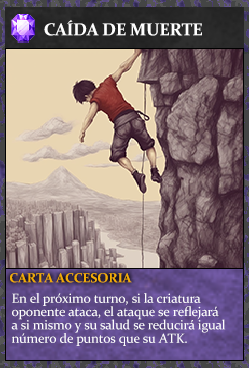
<style>
.page{position:relative;width:249px;height:368px}
.page>*{position:absolute;margin:0}
.t1{font:17.3px "Constantia-Bold";letter-spacing:-0.02em;color:#ffffff}
.t2{font:13.3px "Constantia-Bold";letter-spacing:-0.02em;color:#f2ac05}
.t3{font:13.3px/13.3px "Constantia";letter-spacing:-0.02em;color:#ffffff}
</style>
<div class="page">
<p class="t1" style="left:44px;top:20px;width:158px;height:16px">CAÍDA DE MUERTE</p>
<p class="t2" style="left:10px;top:273px;width:122px;height:10px">CARTA ACCESORIA</p>
<p class="t3" style="left:11px;top:293px;width:215px;height:53px">En el próximo turno, si la criatura<br>oponente ataca, el ataque se reflejará<br>a si mismo y su salud se reducirá igual <br>número de puntos que su ATK.</p>
</div>
